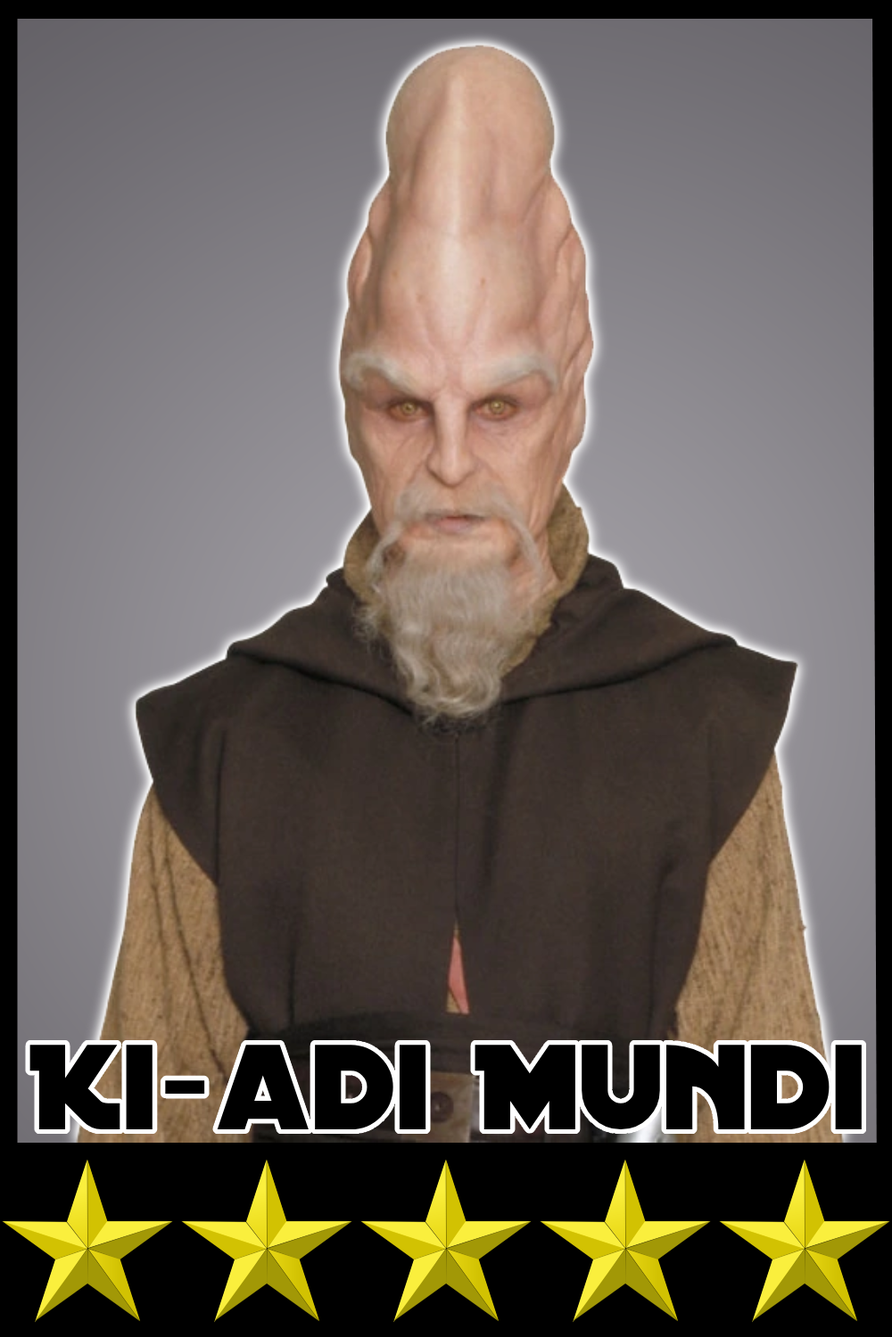
<style>
.page{position:relative;width:892px;height:1337px}
.page>*{position:absolute;margin:0}
.t1{font:130.1px "DistantGalaxy";color:#000000}
</style>
<div class="page">
<p class="t1" style="left:29px;top:1045px;width:832px;height:85px">Ki-adi Mundi</p>
</div>
